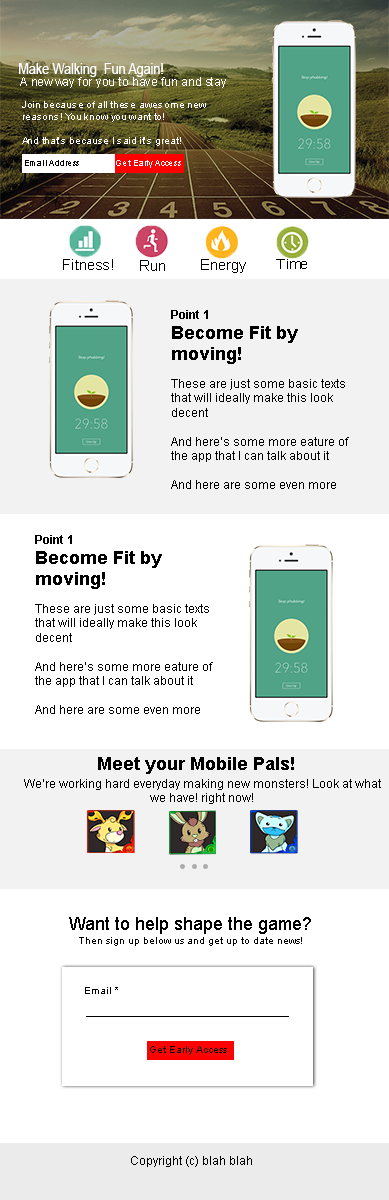
<style>
.page{position:relative;width:389px;height:1200px;background:#ffffff}
.page>*{position:absolute;margin:0}
.t1{font:15.1px "ArialMT";color:#ffffff;scale:0.83 1}
.t2{font:11.7px "ArialMT";color:#ffffff}
.t3{font:10px "ArialMT";color:#ffffff}
.t4{font:8.3px "ArialMT";color:#000000}
.t5{font:8.3px "ArialMT";color:#ffffff}
.t6{font:14.6px "ArialMT";color:#000000}
.t7{font:13.8px "ArialMT";color:#000000;scale:1.06 1}
.t8{font:12px "Arial-BoldMT";color:#000000;scale:0.97 1}
.t9{font:18px "Arial-BoldMT";color:#000000}
.t10{font:12px "ArialMT";color:#000000}
.t11{font:18px "ArialMT";color:#000000}
.t12{font:10px "ArialMT";color:#000000}
</style>
<div class="page">
<p class="t1" style="left:19px;top:63px;width:144px;height:14px">Make Walking  Fun Again!</p>
<p class="t2" style="left:20px;top:77px;width:206px;height:11px">A new way for you to have fun and stay active!</p>
<p class="t3" style="left:22px;top:101px;width:184px;height:45px">Join because of all these awesome new reasons! You know you want to!<br><br>And that’s because I said it’s great!</p>
<p class="t4" style="left:25px;top:160px;width:54px;height:6px">Email Address</p>
<p class="t5" style="left:116px;top:160px;width:65px;height:8px">Get Early Access</p>
<p class="t6" style="left:63px;top:259px;width:50px;height:11px">Fitness!</p>
<p class="t6" style="left:140px;top:260px;width:25px;height:11px">Run</p>
<p class="t6" style="left:201px;top:259px;width:45px;height:14px">Energy</p>
<p class="t7" style="left:276px;top:259px;width:31px;height:10px">Time</p>
<p class="t8" style="left:171px;top:310px;width:37px;height:9px">Point 1</p>
<p class="t9" style="left:172px;top:326px;width:126px;height:38px">Become Fit by moving!</p>
<p class="t10" style="left:171px;top:379px;width:178px;height:110px">These are just some basic texts that will ideally make this look decent<br><br>And here’s some more eature of the app that I can talk about it <br><br>And here are some even more</p>
<p class="t8" style="left:35px;top:535px;width:37px;height:9px">Point 1</p>
<p class="t9" style="left:36px;top:551px;width:126px;height:38px">Become Fit by moving!</p>
<p class="t10" style="left:35px;top:604px;width:178px;height:110px">These are just some basic texts that will ideally make this look decent<br><br>And here’s some more eature of the app that I can talk about it <br><br>And here are some even more</p>
<p class="t9" style="left:98px;top:757px;width:196px;height:17px">Meet your Mobile Pals!</p>
<p class="t10" style="left:24px;top:779px;width:357px;height:25px;text-align:center">We’re working hard everyday making new monsters! Look at what we have! right now!</p>
<p class="t11" style="left:69px;top:917px;width:242px;height:17px">Want to help shape the game?</p>
<p class="t12" style="left:79px;top:937px;width:223px;height:9px">Then sign up below us and get up to date news!</p>
<p class="t12" style="left:85px;top:987px;width:33px;height:7px">Email *</p>
<p class="t12" style="left:150px;top:1046px;width:77px;height:9px">Get Early Access</p>
<p class="t10" style="left:131px;top:1156px;width:121px;height:11px">Copyright (c) blah blah</p>
</div>
